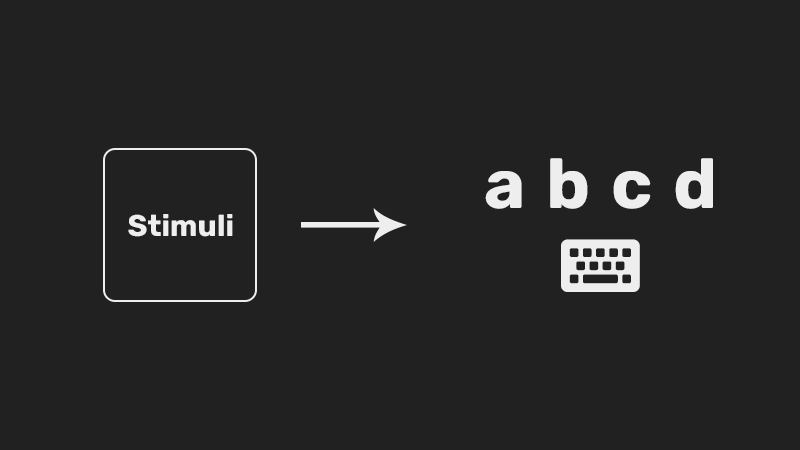
<style>
.page{position:relative;width:800px;height:450px;background:#212121}
.page>*{position:absolute;margin:0}
.t1{font:70px "Rubik-Bold";color:#eeeeee}
.t2{font:70px "FontAwesome5Free-Solid";color:#eeeeee}
.t3{font:30px "Rubik-Bold";color:#eeeeee}
</style>
<div class="page">
<p class="t1" style="left:485px;top:158px;width:228px;height:134px;text-align:center">a  b  c  d<br><span class="t2">keyboard</span></p>
<p class="t3" style="left:128px;top:214px;width:105px;height:23px">Stimuli</p>
</div>
